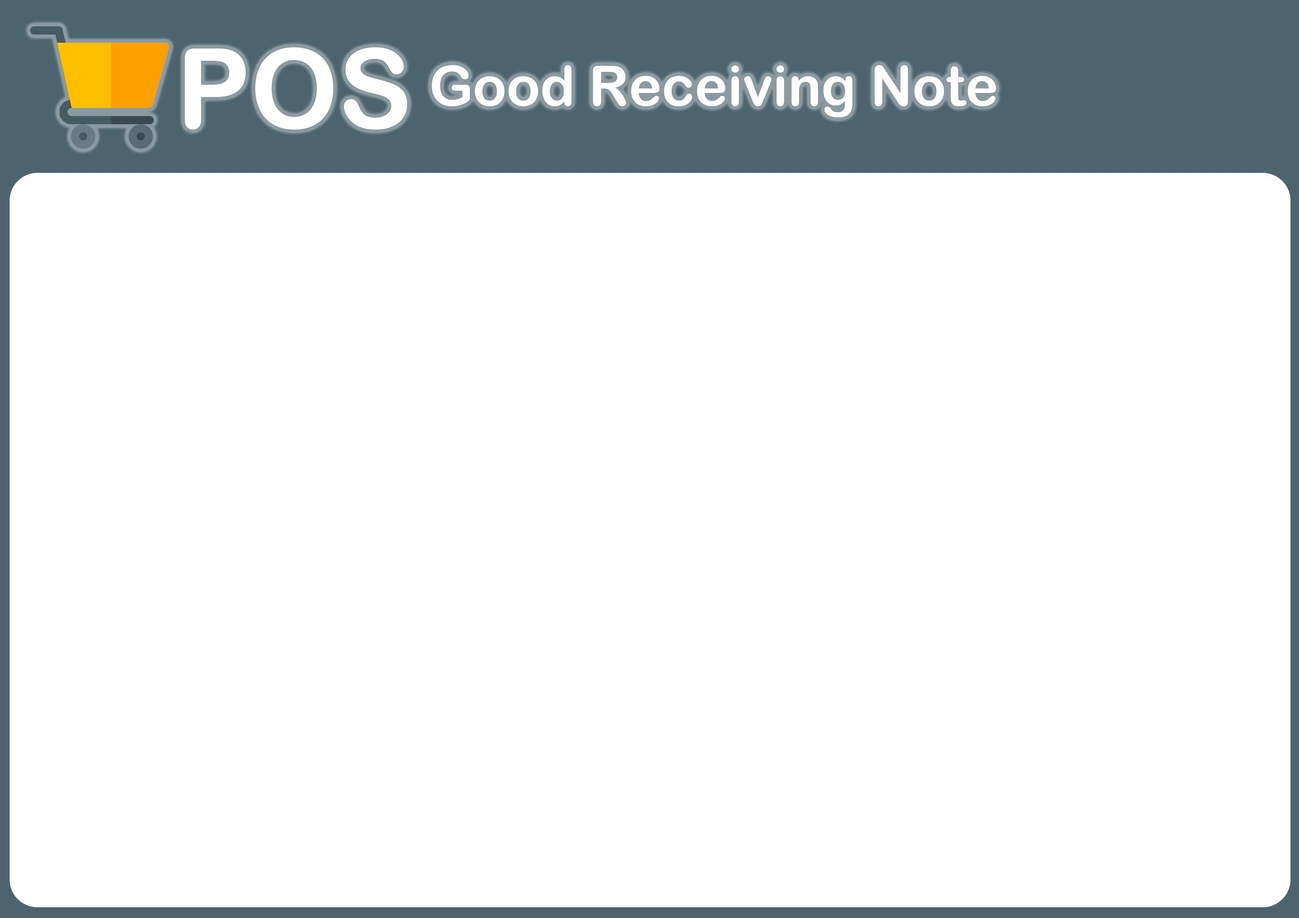
<style>
.page{position:relative;width:1299px;height:918px;background:#ffffff}
.page>*{position:absolute;margin:0}
.t1{font:111.1px "ArialRoundedMTBold";color:#ffffff}
.t2{font:55.5px "ArialRoundedMTBold";color:#ffffff}
</style>
<div class="page">
<p class="t1" style="left:185px;top:47px;width:222px;height:83px">POS</p>
<p class="t2" style="left:432px;top:65px;width:564px;height:52px">Good Receiving Note</p>
</div>
